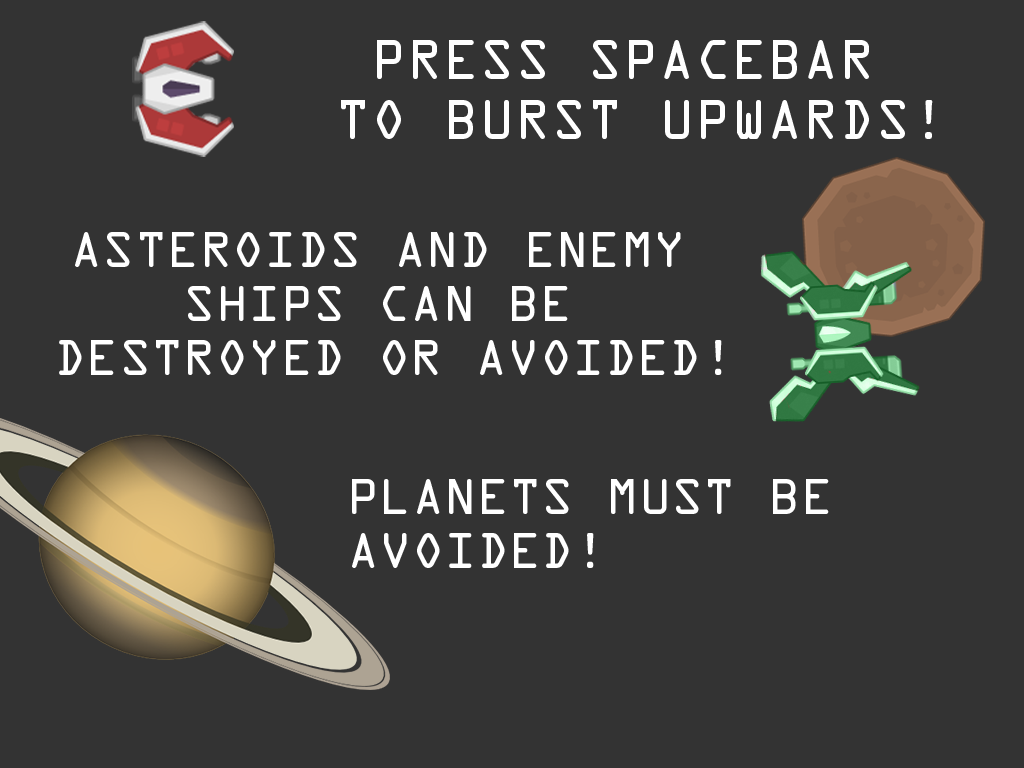
<style>
.page{position:relative;width:1024px;height:768px;background:#333333}
.page>*{position:absolute;margin:0}
.t1{font:50px "OCRAStd";color:#ffffff}
.t2{font:45px "OCRAStd";color:#ffffff}
</style>
<div class="page">
<p class="t1" style="left:341px;top:40px;width:592px;height:99px;text-align:center">PRESS SPACEBAR <br>TO BURST UPWARDS!</p>
<p class="t2" style="left:59px;top:232px;width:663px;height:143px;text-align:center">ASTEROIDS AND ENEMY <br>SHIPS CAN BE <br>DESTROYED OR AVOIDED!</p>
<p class="t2" style="left:352px;top:479px;width:477px;height:89px">PLANETS MUST BE <br>AVOIDED!</p>
</div>
